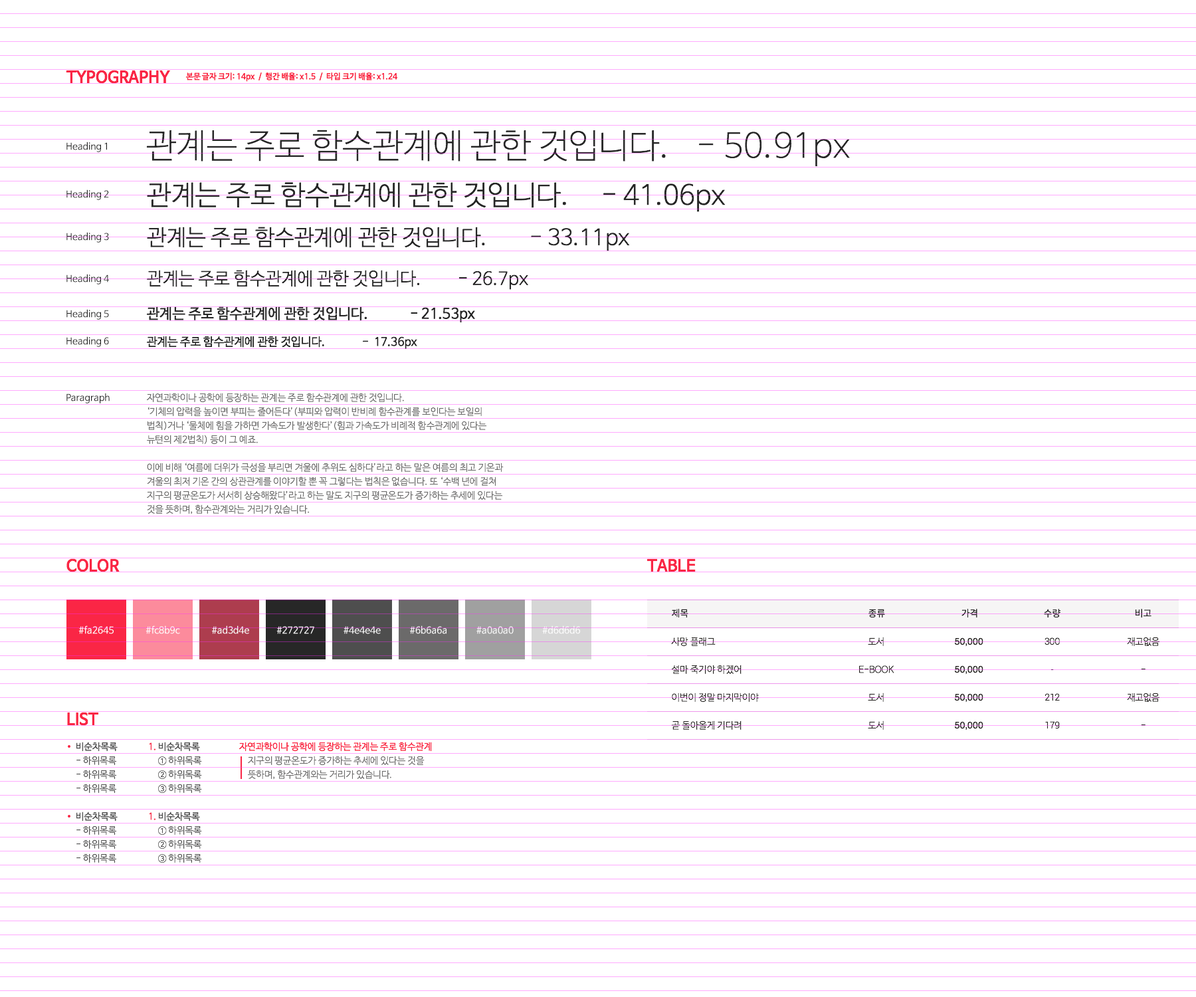
<style>
.page{position:relative;width:1196px;height:997px;background:#ffffff}
.page>*{position:absolute;margin:0}
.t1{font:8px "NanumBarunGothicOTFBold";color:#fa2645}
.t2{font:33.8px "NanumBarunGothicOTFUltraLight";color:#272727}
.t3{font:9.3px "NanumBarunGothicOTF";color:#222222}
.t4{font:27.3px "NanumBarunGothicOTFLight";color:#272727}
.t5{font:22px "NanumBarunGothicOTFLight";color:#272727}
.t6{font:17.7px "NanumBarunGothicOTFLight";color:#272727}
.t7{font:14.3px "NanumBarunGothicOTF";color:#272727}
.t8{font:11.5px "NanumBarunGothicOTF";color:#272727}
.t9{font:9.3px "NanumBarunGothicOTFLight";color:#6b6a6a}
.t10{font:9.3px "SpoqaHanSans-Regular";letter-spacing:-0.025em;color:#272727;text-transform:uppercase}
.t11{font:9.3px "NanumBarunGothicOTF";color:#ffffff}
.t12{font:9.3px "NanumBarunGothicOTFLight";color:#272522;text-transform:uppercase}
.t13{font:9.3px "NanumBarunGothicOTFLight";letter-spacing:-0.025em;color:#272522;text-transform:uppercase}
.t14{font:9.3px "Helvetica";color:#272522;text-transform:uppercase}
.t15{font:9.3px "Roboto-Light";letter-spacing:-0.025em;color:#272522;text-transform:uppercase}
.t16{font:9.3px "NanumBarunGothicOTF";color:#4e4e4e}
.t17{font:9.3px "NanumBarunGothicOTF";color:#fa2645}
.t18{font:9.3px "NanumBarunGothicOTFLight";color:#4e4e4e}
</style>
<div class="page">
<p class="t1" style="left:66px;top:70px;width:104px;height:14px">Typography</p>
<p class="t1" style="left:185px;top:72px;width:213px;height:10px">본문 글자 크기: 14px  /  행간 배율: x1.5  /  타입 크기 배율: x1.24</p>
<p class="t2" style="left:146px;top:130px;width:704px;height:37px">관계는 주로 함수관계에 관한 것입니다.  - 50.91px</p>
<p class="t3" style="left:66px;top:142px;width:41px;height:10px">Heading 1</p>
<p class="t4" style="left:147px;top:182px;width:579px;height:30px">관계는 주로 함수관계에 관한 것입니다.  - 41.06px</p>
<p class="t3" style="left:66px;top:189px;width:43px;height:11px">Heading 2</p>
<p class="t3" style="left:66px;top:232px;width:43px;height:11px">Heading 3</p>
<p class="t5" style="left:147px;top:227px;width:483px;height:24px">관계는 주로 함수관계에 관한 것입니다.  - 33.11px</p>
<p class="t6" style="left:147px;top:270px;width:381px;height:20px">관계는 주로 함수관계에 관한 것입니다.  - 26.7px</p>
<p class="t3" style="left:66px;top:274px;width:43px;height:10px">Heading 4</p>
<p class="t3" style="left:66px;top:309px;width:43px;height:11px">Heading 5</p>
<p class="t7" style="left:147px;top:306px;width:328px;height:16px">관계는 주로 함수관계에 관한 것입니다.  - 21.53px</p>
<p class="t3" style="left:66px;top:336px;width:43px;height:11px">Heading 6</p>
<p class="t8" style="left:147px;top:336px;width:270px;height:13px">관계는 주로 함수관계에 관한 것입니다.  -  17.36px</p>
<p class="t3" style="left:66px;top:393px;width:44px;height:10px">Paragraph</p>
<p class="t9" style="left:147px;top:393px;width:357px;height:121px">자연과학이나 공학에 등장하는 관계는 주로 함수관계에 관한 것입니다.<br>‘기체의 압력을 높이면 부피는 줄어든다’(부피와 압력이 반비례 함수관계를 보인다는 보일의 법칙)거나 ‘물체에 힘을 가하면 가속도가 발생한다’(힘과 가속도가 비례적 함수관계에 있다는 뉴턴의 제2법칙) 등이 그 예죠. <br>이에 비해 ‘여름에 더위가 극성을 부리면 겨울에 추위도 심하다’라고 하는 말은 여름의 최고 기온과 겨울의 최저 기온 간의 상관관계를 이야기할 뿐 꼭 그렇다는 법칙은 없습니다. 또 ‘수백 년에 걸쳐 지구의 평균온도가 서서히 상승해왔다’라고 하는 말도 지구의 평균온도가 증가하는 추세에 있다는 것을 뜻하며, 함수관계와는 거리가 있습니다.</p>
<p class="t1" style="left:66px;top:558px;width:54px;height:14px">color</p>
<p class="t1" style="left:647px;top:558px;width:49px;height:14px">table</p>
<p class="t10" style="left:672px;top:609px;width:16px;height:8px">제목</p>
<p class="t10" style="left:869px;top:609px;width:16px;height:8px">종류</p>
<p class="t10" style="left:962px;top:609px;width:16px;height:8px">가격</p>
<p class="t10" style="left:1044px;top:609px;width:17px;height:8px">수량</p>
<p class="t10" style="left:1135px;top:609px;width:17px;height:8px">비고</p>
<p class="t11" style="left:78px;top:625px;width:36px;height:9px">#fa2645</p>
<p class="t11" style="left:146px;top:625px;width:34px;height:9px">#fc8b9c</p>
<p class="t11" style="left:212px;top:625px;width:37px;height:9px">#ad3d4e</p>
<p class="t11" style="left:276px;top:626px;width:38px;height:8px">#272727</p>
<p class="t11" style="left:344px;top:626px;width:37px;height:8px">#4e4e4e</p>
<p class="t11" style="left:410px;top:625px;width:37px;height:9px">#6b6a6a</p>
<p class="t11" style="left:476px;top:626px;width:38px;height:8px">#a0a0a0</p>
<p class="t11" style="left:542px;top:625px;width:38px;height:9px">#d6d6d6</p>
<p class="t12" style="left:671px;top:637px;width:88px;height:93px">사망 플래그<br>설마 죽기야 하겠어<br>이번이 정말 마지막이야<br>곧 돌아올게 기다려</p>
<p class="t13" style="left:859px;top:637px;width:35px;height:93px;text-align:center">도서<br>e-book<br>도서<br>도서</p>
<p class="t14" style="left:954px;top:637px;width:30px;height:93px">50,000<br>50,000<br>50,000<br>50,000</p>
<p class="t15" style="left:1045px;top:637px;width:15px;height:92px;text-align:center">300<br>-<br>212<br>179</p>
<p class="t13" style="left:1127px;top:637px;width:33px;height:89px;text-align:center">재고없음<br>-<br>재고없음<br>-</p>
<p class="t1" style="left:67px;top:712px;width:32px;height:14px">list</p>
<p class="t16" style="left:76px;top:742px;width:42px;height:9px">비순차목록</p>
<p class="t17" style="left:149px;top:742px;width:7px;height:8px">1.</p>
<p class="t16" style="left:158px;top:742px;width:42px;height:9px">비순차목록</p>
<p class="t17" style="left:239px;top:742px;width:193px;height:9px">자연과학이나 공학에 등장하는 관계는 주로 함수관계</p>
<p class="t18" style="left:76px;top:756px;width:41px;height:37px">- 하위목록<br>- 하위목록<br>- 하위목록</p>
<p class="t18" style="left:158px;top:756px;width:44px;height:37px">① 하위목록<br>② 하위목록<br>③ 하위목록</p>
<p class="t9" style="left:248px;top:756px;width:177px;height:24px">지구의 평균온도가 증가하는 추세에 있다는 것을 뜻하며, 함수관계와는 거리가 있습니다.</p>
<p class="t16" style="left:76px;top:811px;width:42px;height:10px">비순차목록</p>
<p class="t17" style="left:149px;top:812px;width:7px;height:8px">1.</p>
<p class="t16" style="left:158px;top:811px;width:42px;height:10px">비순차목록</p>
<p class="t18" style="left:76px;top:825px;width:41px;height:38px">- 하위목록<br>- 하위목록<br>- 하위목록</p>
<p class="t18" style="left:158px;top:825px;width:44px;height:38px">① 하위목록<br>② 하위목록<br>③ 하위목록</p>
</div>
